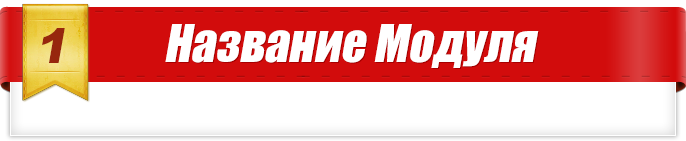
<style>
.page{position:relative;width:686px;height:141px;background:#ffffff}
.page>*{position:absolute;margin:0}
.t1{font:48px "Arial-Black";color:#97270d;font-style:italic}
.t2{font:48px "Impact";color:#ffffff;font-style:italic}
</style>
<div class="page">
<p class="t1" style="left:42px;top:28px;width:23px;height:35px">1</p>
<p class="t2" style="left:165px;top:24px;width:374px;height:44px">Название Модуля</p>
</div>
